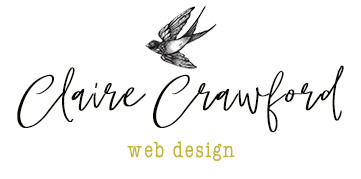
<style>
.page{position:relative;width:361px;height:179px;background:#ffffff}
.page>*{position:absolute;margin:0}
.t1{font:90.7px "Puzzled-Regular";letter-spacing:0.018em;color:#050901;scale:1.05 1}
.t2{font:22.7px "AmerTypewriterITCbyBT-Medium";letter-spacing:0.033em;color:#c5b337;scale:0.84 1}
</style>
<div class="page">
<p class="t1" style="left:17px;top:65px;width:327px;height:68px">ClaireCrawford</p>
<p class="t2" style="left:127px;top:141px;width:108px;height:20px">web design</p>
</div>
